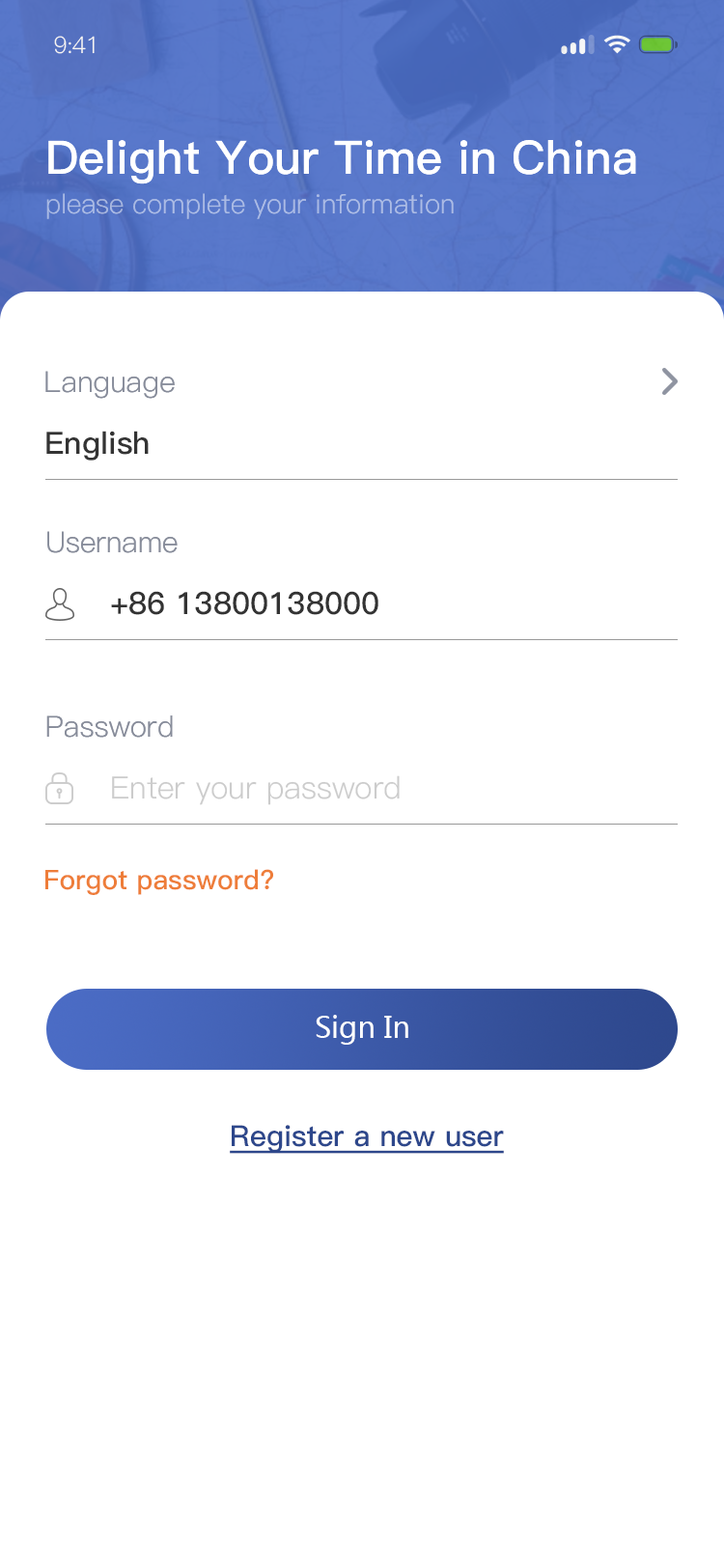
<style>
.page{position:relative;width:724px;height:1568px;background:#ffffff}
.page>*{position:absolute;margin:0}
.t1{font:23.2px "PingFang-SC-Regular";letter-spacing:-0.025em;color:#ffffff}
.t2{font:46.3px "PingFang-SC-Bold";color:#ffffff}
.t3{font:27px "PingFang-SC-Regular";color:#acbbe5}
.t4{font:29px "PingFang-SC-Regular";color:#878c9a}
.t5{font:29px "PingFang-SC-Regular";color:#878c9a;text-transform:uppercase}
.t6{font:30.9px "PingFang-SC-Bold";color:#333333}
.t7{font:30.9px "PingFang-SC-Regular";color:#cccccc}
.t8{font:27px "PingFang-SC-Bold";color:#ee7d39}
.t9{font:29px "MicrosoftYaHei";color:#ffffff}
.t10{font:29px "PingFang-SC-Bold";color:#2d478b;text-decoration:underline}
</style>
<div class="page">
<p class="t1" style="left:54px;top:36px;width:41px;height:18px">9:41</p>
<p class="t2" style="left:48px;top:140px;width:588px;height:44px">Delight Your Time in China</p>
<p class="t3" style="left:46px;top:193px;width:408px;height:26px">please complete your information</p>
<p class="t4" style="left:45px;top:371px;width:130px;height:28px"><span class="t5">l</span>anguage</p>
<p class="t6" style="left:46px;top:431px;width:103px;height:30px">English</p>
<p class="t4" style="left:47px;top:531px;width:131px;height:22px">Username</p>
<p class="t6" style="left:111px;top:591px;width:267px;height:24px">+86 13800138000</p>
<p class="t4" style="left:46px;top:715px;width:127px;height:23px">Password</p>
<p class="t7" style="left:112px;top:775px;width:288px;height:30px">Enter your password</p>
<p class="t8" style="left:45px;top:869px;width:228px;height:26px">Forgot password?</p>
<p class="t9" style="left:316px;top:1015px;width:92px;height:30px">Sign In</p>
<p class="t10" style="left:230px;top:1125px;width:274px;height:29px">Register a new user</p>
</div>
